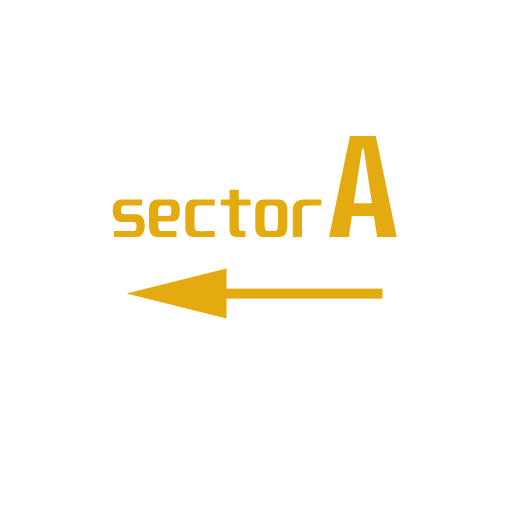
<style>
.page{position:relative;width:512px;height:512px;background:#ffffff}
.page>*{position:absolute;margin:0}
.t1{font:58.3px "Unispace-Bold";color:#e4ab10}
.t2{font:125px "Unispace-Bold";color:#e4ab10}
</style>
<div class="page">
<p class="t1" style="left:112px;top:136px;width:285px;height:101px">sector<span class="t2">A</span></p>
</div>
